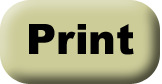
<style>
.page{position:relative;width:162px;height:84px;background:#cccc99}
.page>*{position:absolute;margin:0}
.t1{font:41.7px "Arial-Black";color:#000000}
</style>
<div class="page">
<p class="t1" style="left:29px;top:24px;width:105px;height:31px">Print</p>
</div>
